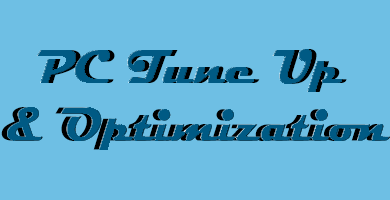
<style>
.page{position:relative;width:390px;height:200px;background:#6ebfe4}
.page>*{position:absolute;margin:0}
.t1{font:48px "Magneto-Bold"}
</style>
<div class="page">
<p class="t1" style="left:1px;top:49px;width:384px;height:101px;text-align:center">PC Tune Up<br>&amp; Optimization</p>
</div>
